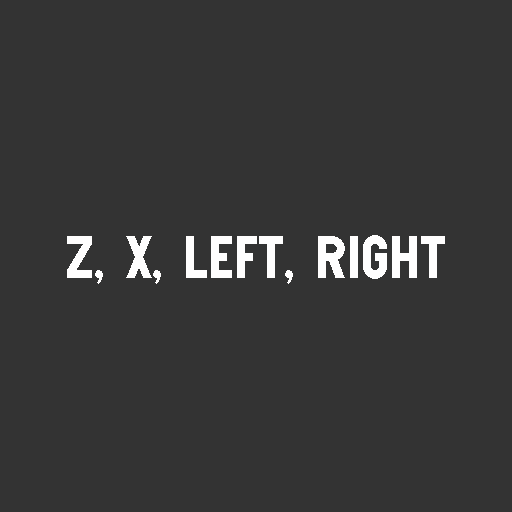
<style>
.page{position:relative;width:512px;height:512px;background:#333333}
.page>*{position:absolute;margin:0}
.t1{font:42px "NTCornelia-Regular";color:#fffefe}
</style>
<div class="page">
<p class="t1" style="left:67px;top:235px;width:378px;height:49px">Z, X, Left, Right</p>
</div>
